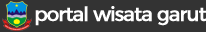
<style>
.page{position:relative;width:206px;height:32px;background:#333333}
.page>*{position:absolute;margin:0}
.t1{font:20px "Montserrat-Regular";letter-spacing:-0.075em;color:#ffffff;font-weight:bold}
</style>
<div class="page">
<p class="t1" style="left:35px;top:6px;width:172px;height:20px">portal wisata garut</p>
</div>
